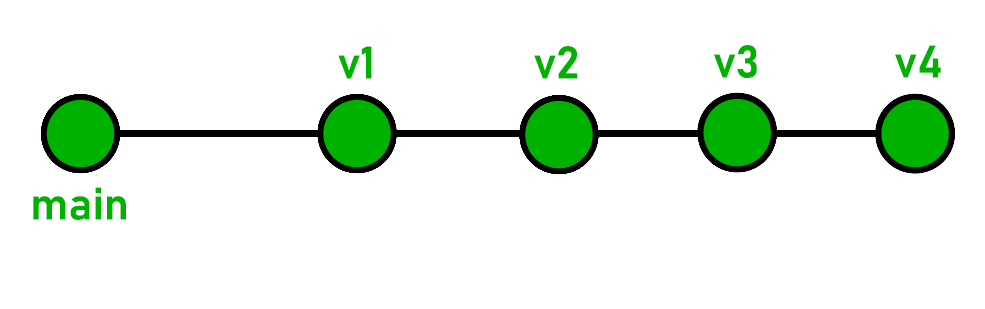
<style>
.page{position:relative;width:985px;height:309px;background:#ffffff}
.page>*{position:absolute;margin:0}
.t1{font:45px "Bahnschrift-SemiBold";color:#00b200}
</style>
<div class="page">
<p class="t1" style="left:338px;top:46px;width:34px;height:33px">v1</p>
<p class="t1" style="left:534px;top:46px;width:44px;height:33px">v2</p>
<p class="t1" style="left:714px;top:45px;width:43px;height:33px">v3</p>
<p class="t1" style="left:895px;top:45px;width:46px;height:33px">v4</p>
<p class="t1" style="left:33px;top:187px;width:93px;height:33px">main</p>
</div>
